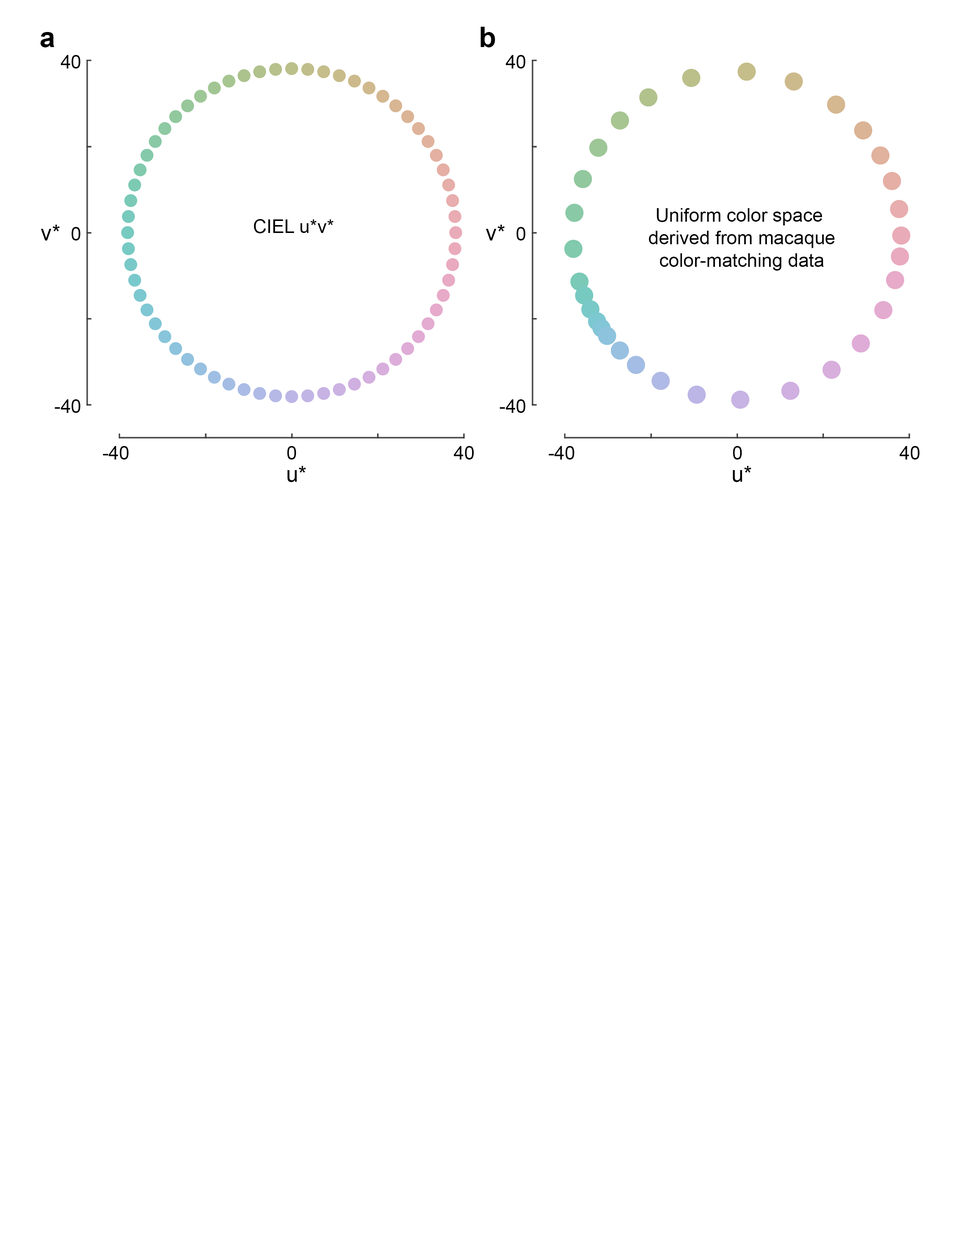
<style>
.page{position:relative;width:960px;height:1242px;background:#ffffff}
.page>*{position:absolute;margin:0}
.t1{font:28.2px "Arial-BoldMT";color:#000000}
.t2{font:18.8px/34.4px "ArialMT";color:#000000}
.t3{font:18.8px "ArialMT";color:#000000}
.t4{font:22px "ArialMT";color:#000000}
</style>
<div class="page">
<p class="t1" style="left:40px;top:27px;width:455px;height:20px">a                                                      b</p>
<p class="t2" style="left:55px;top:55px;width:26px;height:358px;text-align:right">40<br><br><br><br><br>0<br><br><br><br><br>-40</p>
<p class="t2" style="left:500px;top:55px;width:26px;height:358px;text-align:right">40<br><br><br><br><br>0<br><br><br><br><br>-40</p>
<p class="t3" style="left:649px;top:208px;width:186px;height:63px;text-align:center">Uniform color space <br>derived from macaque<br>color-matching data</p>
<p class="t3" style="left:254px;top:219px;width:80px;height:14px">CIEL u*v*</p>
<p class="t4" style="left:41px;top:225px;width:19px;height:16px">v*</p>
<p class="t4" style="left:486px;top:225px;width:19px;height:16px">v*</p>
<p class="t3" style="left:103px;top:446px;width:371px;height:14px">-40                              0                              40</p>
<p class="t3" style="left:548px;top:446px;width:372px;height:14px">-40                              0                              40</p>
<p class="t4" style="left:287px;top:466px;width:19px;height:16px">u*</p>
<p class="t4" style="left:733px;top:466px;width:18px;height:16px">u*</p>
</div>
